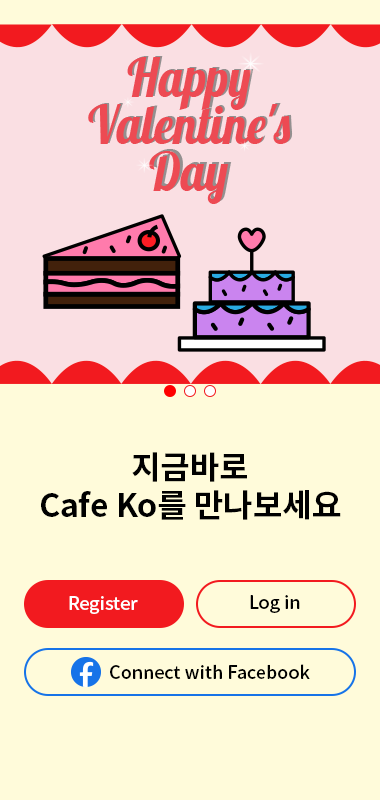
<style>
.page{position:relative;width:380px;height:800px;background:#fffbda}
.page>*{position:absolute;margin:0}
.t1{font:32px "NotoSansKR-Bold";color:#000000}
.t2{font:18px "NotoSansKR-Medium";color:#ffffff}
.t3{font:18px "NotoSansKR-Regular";color:#ffffff}
.t4{font:18px "NotoSansKR-Medium";color:#000000}
.t5{font:18px "NotoSansKR-Regular";color:#000000}
</style>
<div class="page">
<p class="t1" style="left:41px;top:452px;width:300px;height:68px;text-align:center">지금바로<br>Cafe Ko를 만나보세요</p>
<p class="t2" style="left:69px;top:596px;width:69px;height:18px"><span class="t3"><br></span>Register</p>
<p class="t4" style="left:250px;top:595px;width:50px;height:18px"><span class="t5"><br></span>Log in</p>
<p class="t4" style="left:110px;top:664px;width:200px;height:15px">Connect with Facebook</p>
</div>
